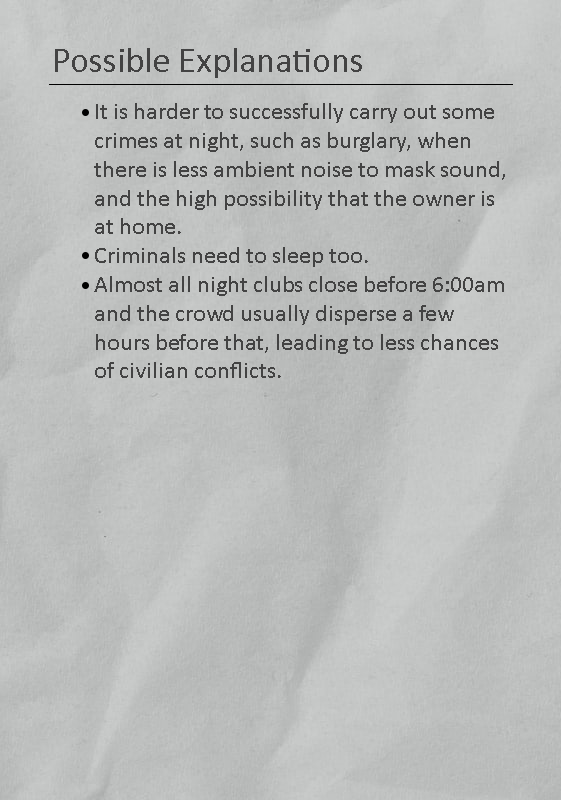
<style>
.page{position:relative;width:561px;height:800px}
.page>*{position:absolute;margin:0}
.t1{font:36px "Calibri";color:#434343}
.t2{font:24px "Calibri";color:#434343}
</style>
<div class="page">
<p class="t1" style="left:55px;top:48px;width:307px;height:30px">Possible Explanations</p>
<p class="t2" style="left:94px;top:103px;width:411px;height:275px">It is harder to successfully carry out some <br>crimes at night, such as burglary, when <br>there is less ambient noise to mask sound, <br>and the high possibility that the owner is <br>at home.<br>Criminals need to sleep too.<br>Almost all night clubs close before 6:00am<br>and the crowd usually disperse a few <br>hours before that, leading to less chances <br>of civilian conflicts.</p>
</div>
